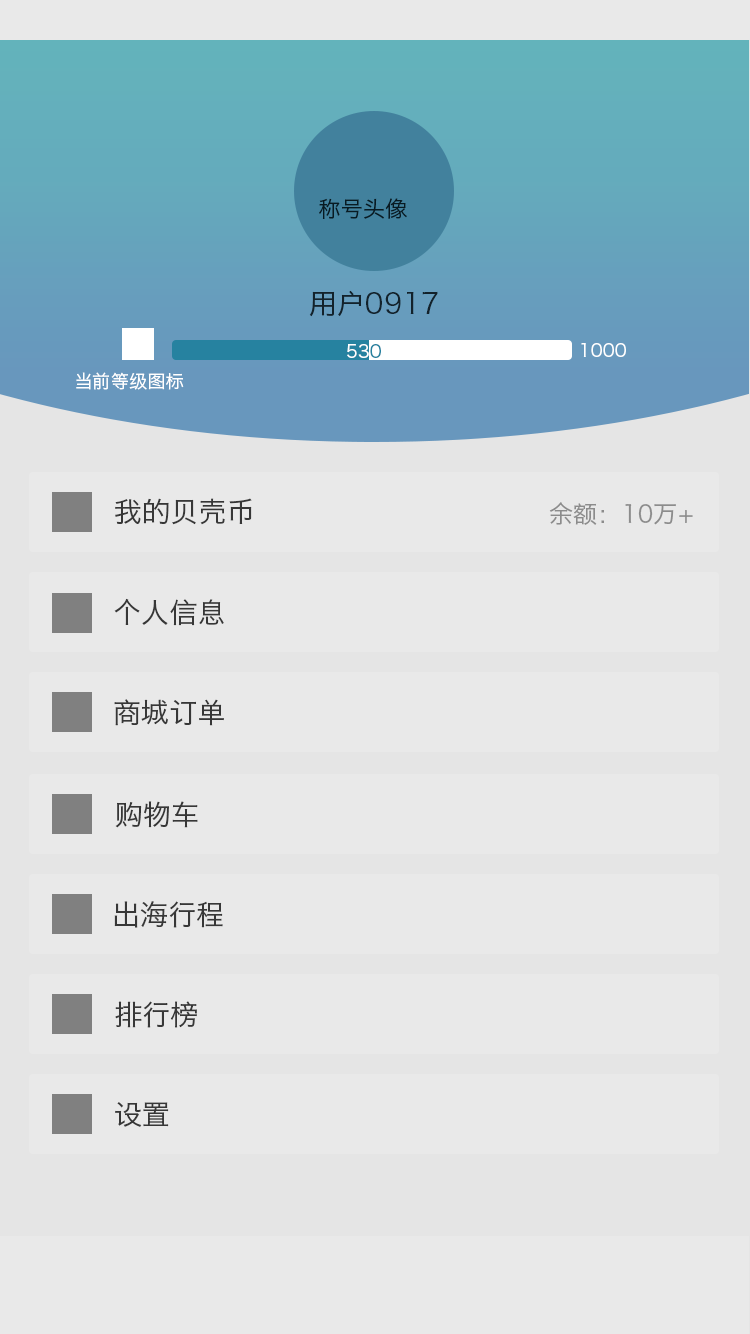
<style>
.page{position:relative;width:750px;height:1334px;background:#e9e9e9}
.page>*{position:absolute;margin:0}
.t1{font:22px "HiraginoSansGB-W3";color:#081a22}
.t2{font:28px "HiraginoSansGB-W3";color:#13222b}
.t3{font:18px "HiraginoSansGB-W3";color:#ffffff}
.t4{font:28px "HiraginoSansGB-W3";color:#373737}
.t5{font:24px "HiraginoSansGB-W3";color:#8c8c8c}
</style>
<div class="page">
<p class="t1" style="left:319px;top:198px;width:88px;height:21px">称号头像</p>
<p class="t2" style="left:309px;top:290px;width:129px;height:27px">用户0917</p>
<p class="t3" style="left:581px;top:343px;width:45px;height:14px">1000</p>
<p class="t3" style="left:76px;top:372px;width:108px;height:18px">当前等级图标</p>
<p class="t4" style="left:115px;top:498px;width:137px;height:27px">我的贝壳币</p>
<p class="t5" style="left:549px;top:502px;width:144px;height:23px">余额：10万+</p>
<p class="t4" style="left:114px;top:598px;width:110px;height:28px">个人信息</p>
<p class="t4" style="left:114px;top:699px;width:110px;height:27px">商城订单</p>
<p class="t4" style="left:115px;top:801px;width:83px;height:27px">购物车</p>
<p class="t4" style="left:114px;top:901px;width:109px;height:27px">出海行程</p>
<p class="t4" style="left:115px;top:1001px;width:82px;height:27px">排行榜</p>
<p class="t4" style="left:115px;top:1102px;width:54px;height:25px">设置</p>
</div>
